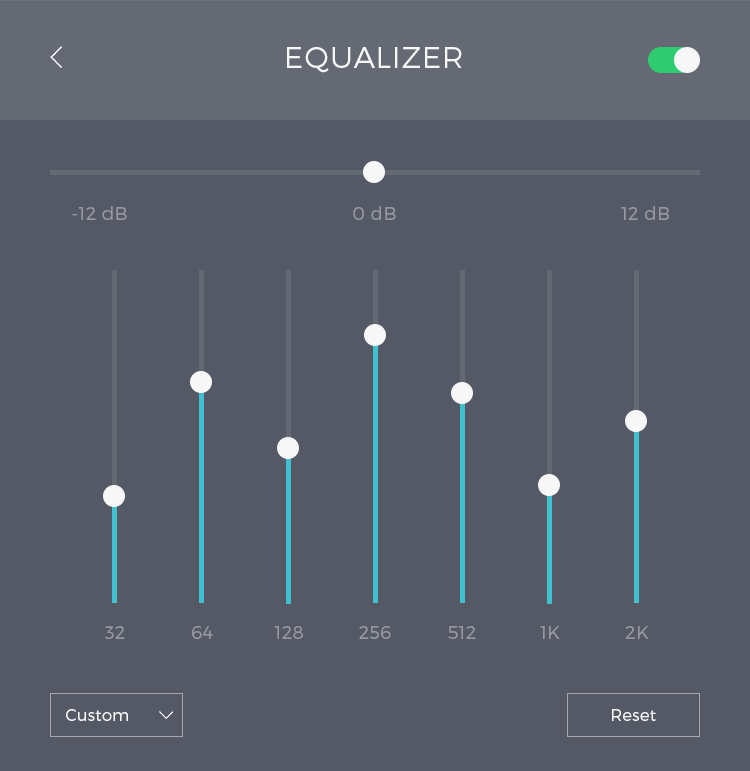
<style>
.page{position:relative;width:750px;height:771px;background:#545965}
.page>*{position:absolute;margin:0}
.t1{font:30px "Montserrat-Light";letter-spacing:0.025em;color:#f7f7f7}
.t2{font:18px "Montserrat-Light";letter-spacing:0.025em;color:#95989f}
.t3{font:16px "Montserrat-Light";letter-spacing:0.025em;color:#f7f7f7}
</style>
<div class="page">
<p class="t1" style="left:287px;top:47px;width:175px;height:26px">EQUALIZER</p>
<p class="t2" style="left:72px;top:206px;width:55px;height:14px">-12 dB</p>
<p class="t2" style="left:353px;top:206px;width:43px;height:14px">0 dB</p>
<p class="t2" style="left:621px;top:206px;width:48px;height:14px">12 dB</p>
<p class="t2" style="left:105px;top:626px;width:20px;height:13px">32</p>
<p class="t2" style="left:192px;top:626px;width:21px;height:13px">64</p>
<p class="t2" style="left:274px;top:626px;width:29px;height:13px">128</p>
<p class="t2" style="left:359px;top:626px;width:32px;height:13px">256</p>
<p class="t2" style="left:448px;top:626px;width:28px;height:13px">512</p>
<p class="t2" style="left:540px;top:626px;width:20px;height:13px">1K</p>
<p class="t2" style="left:625px;top:626px;width:24px;height:13px">2K</p>
<p class="t3" style="left:66px;top:709px;width:62px;height:12px">Custom</p>
<p class="t3" style="left:612px;top:709px;width:44px;height:12px">Reset</p>
</div>
